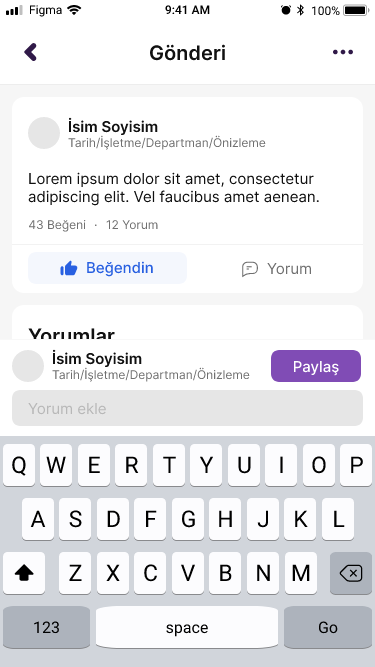
<style>
.page{position:relative;width:375px;height:667px;background:#ffffff}
.page>*{position:absolute;margin:0}
.t1{font:12px "SFProText-Regular";color:#000000}
.t2{font:12px "SFProText-Semibold";color:#000000}
.t3{font:20px "Inter-SemiBold";color:#111111}
.t4{font:15px "Inter-SemiBold";color:#111111}
.t5{font:12px "Inter-Regular";color:#707070}
.t6{font:15px "Inter-Regular";color:#111111}
.t7{font:13px "Inter-Regular";color:#707070}
.t8{font:15px "Inter-Medium";color:#2860e1}
.t9{font:15px "Inter-Regular";color:#707070}
.t10{font:15px "Inter-Medium";color:#ffffff}
.t11{font:15px "Inter-Regular";color:#b8b8b8}
.t12{font:23px "SFProText-Regular";color:#000000}
.t13{font:16px "SFProText-Regular";color:#000000}
</style>
<div class="page">
<p class="t1" style="left:29px;top:5px;width:33px;height:12px">Figma</p>
<p class="t2" style="left:165px;top:5px;width:45px;height:10px">9:41 AM</p>
<p class="t1" style="left:311px;top:6px;width:29px;height:10px">100%</p>
<p class="t3" style="left:150px;top:44px;width:75px;height:17px">Gönderi</p>
<p class="t4" style="left:68px;top:117px;width:90px;height:19px">İsim Soyisim</p>
<p class="t5" style="left:68px;top:135px;width:198px;height:15px">Tarih/İşletme/Departman/Önizleme</p>
<p class="t6" style="left:28px;top:172px;width:291px;height:34px">Lorem ipsum dolor sit amet, consectetur adipiscing elit. Vel faucibus amet aenean.</p>
<p class="t5" style="left:29px;top:220px;width:57px;height:12px">43 Beğeni</p>
<p class="t5" style="left:106px;top:220px;width:52px;height:10px">12 Yorum</p>
<p class="t7" style="left:94px;top:224px;width:3px;height:3px">.</p>
<p class="t8" style="left:87px;top:261px;width:66px;height:16px">Beğendin</p>
<p class="t9" style="left:267px;top:263px;width:44px;height:12px">Yorum</p>
<p class="t3" style="left:28px;top:328px;width:87px;height:16px">Yorumlar</p>
<p class="t4" style="left:52px;top:349px;width:90px;height:19px">İsim Soyisim</p>
<p class="t10" style="left:293px;top:361px;width:46px;height:15px">Paylaş</p>
<p class="t5" style="left:52px;top:367px;width:198px;height:15px">Tarih/İşletme/Departman/Önizleme</p>
<p class="t11" style="left:28px;top:403px;width:78px;height:12px">Yorum ekle</p>
<p class="t12" style="left:12px;top:456px;width:14px;height:20px">Q</p>
<p class="t12" style="left:46px;top:456px;width:20px;height:17px">W</p>
<p class="t12" style="left:89px;top:456px;width:11px;height:17px">E</p>
<p class="t12" style="left:126px;top:456px;width:13px;height:17px">R</p>
<p class="t12" style="left:163px;top:456px;width:13px;height:17px">T</p>
<p class="t12" style="left:199px;top:456px;width:15px;height:17px">Y</p>
<p class="t12" style="left:238px;top:456px;width:13px;height:18px">U</p>
<p class="t12" style="left:280px;top:456px;width:3px;height:17px">I</p>
<p class="t12" style="left:312px;top:456px;width:14px;height:18px">O</p>
<p class="t12" style="left:351px;top:456px;width:12px;height:17px">P</p>
<p class="t12" style="left:30px;top:510px;width:16px;height:17px">A</p>
<p class="t12" style="left:69px;top:510px;width:13px;height:18px">S</p>
<p class="t12" style="left:107px;top:510px;width:13px;height:17px">D</p>
<p class="t12" style="left:146px;top:510px;width:11px;height:17px">F</p>
<p class="t12" style="left:182px;top:510px;width:13px;height:18px">G</p>
<p class="t12" style="left:219px;top:510px;width:13px;height:17px">H</p>
<p class="t12" style="left:257px;top:510px;width:12px;height:18px">J</p>
<p class="t12" style="left:295px;top:510px;width:13px;height:17px">K</p>
<p class="t12" style="left:334px;top:510px;width:11px;height:17px">L</p>
<p class="t12" style="left:69px;top:564px;width:13px;height:17px">Z</p>
<p class="t12" style="left:106px;top:564px;width:14px;height:17px">X</p>
<p class="t12" style="left:144px;top:564px;width:13px;height:18px">C</p>
<p class="t12" style="left:180px;top:564px;width:16px;height:17px">V</p>
<p class="t12" style="left:220px;top:564px;width:12px;height:17px">B</p>
<p class="t12" style="left:257px;top:564px;width:13px;height:17px">N</p>
<p class="t12" style="left:292px;top:564px;width:18px;height:17px">M</p>
<p class="t13" style="left:34px;top:621px;width:25px;height:13px">123</p>
<p class="t13" style="left:166px;top:624px;width:42px;height:13px">space</p>
<p class="t13" style="left:318px;top:621px;width:20px;height:13px">Go</p>
</div>
